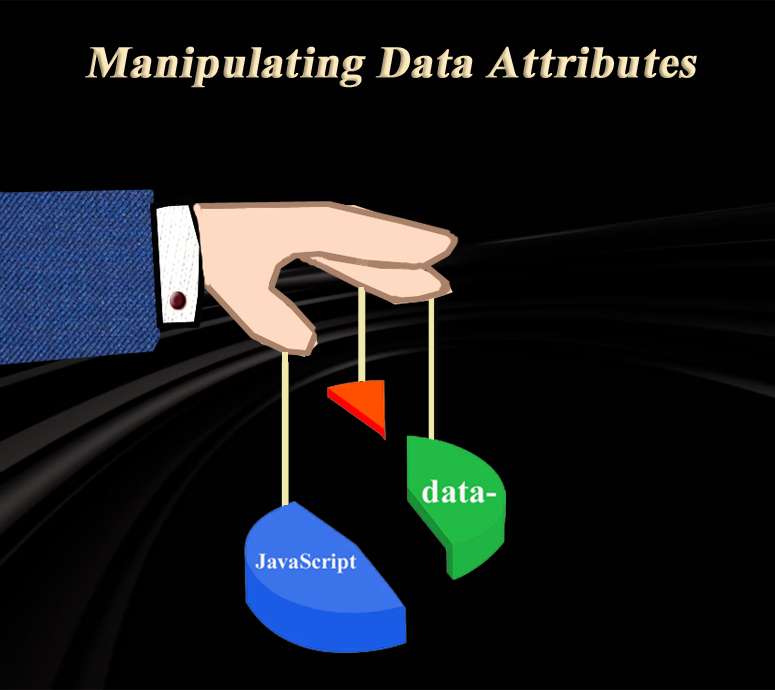
<style>
.page{position:relative;width:775px;height:690px;background:#010101}
.page>*{position:absolute;margin:0}
.t1{font:45px "TimesNewRomanPS-BoldMT";color:#fbe6b5;font-weight:bold;font-style:italic}
</style>
<div class="page">
<p class="t1" style="left:85px;top:46px;width:612px;height:42px">Manipulating Data Attributes</p>
</div>
